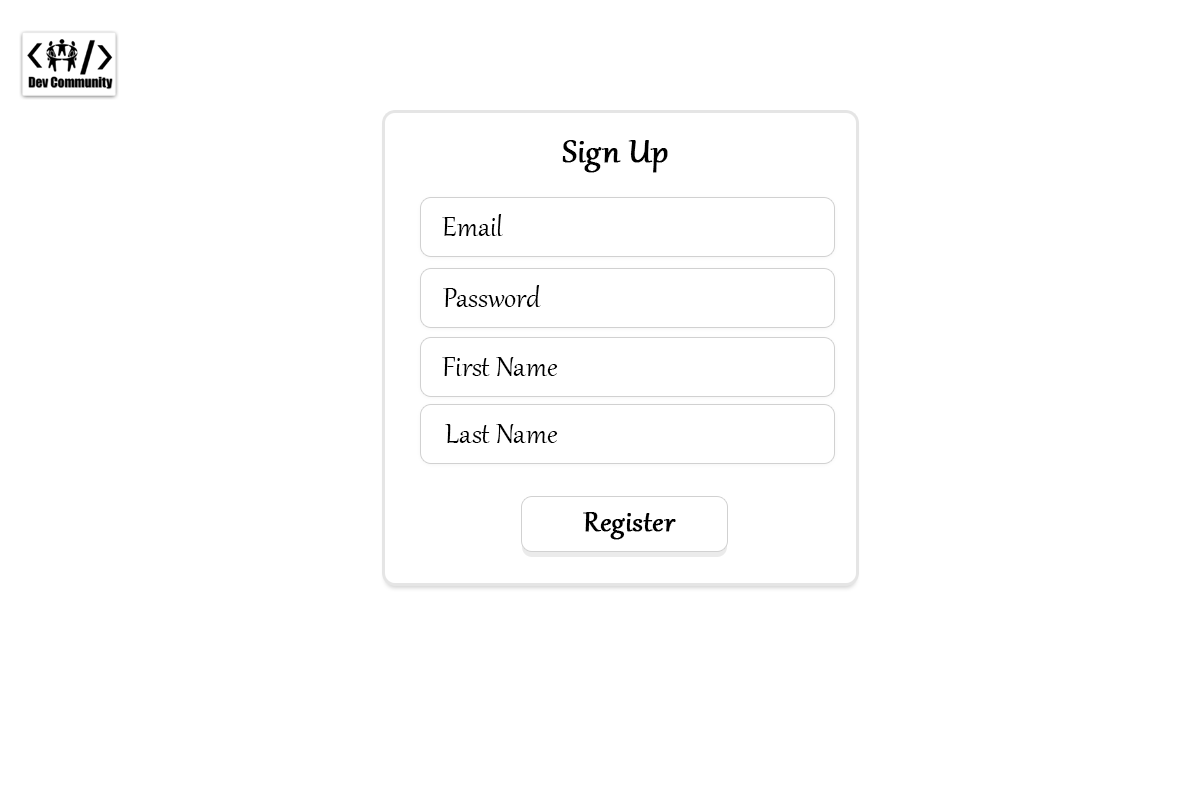
<style>
.page{position:relative;width:1200px;height:800px;background:#ffffff}
.page>*{position:absolute;margin:0}
.t1{font:40px "Gabriola";color:#000000;font-weight:bold}
.t2{font:34px "Gabriola";color:#000000}
.t3{font:34px "Gabriola";color:#000000;font-weight:bold}
</style>
<div class="page">
<p class="t1" style="left:562px;top:140px;width:106px;height:33px">Sign Up</p>
<p class="t2" style="left:442px;top:214px;width:61px;height:22px">Email</p>
<p class="t2" style="left:443px;top:285px;width:98px;height:22px">Password</p>
<p class="t2" style="left:442px;top:357px;width:116px;height:19px">First Name</p>
<p class="t2" style="left:445px;top:424px;width:113px;height:19px">Last Name</p>
<p class="t3" style="left:583px;top:512px;width:93px;height:28px">Register</p>
</div>
